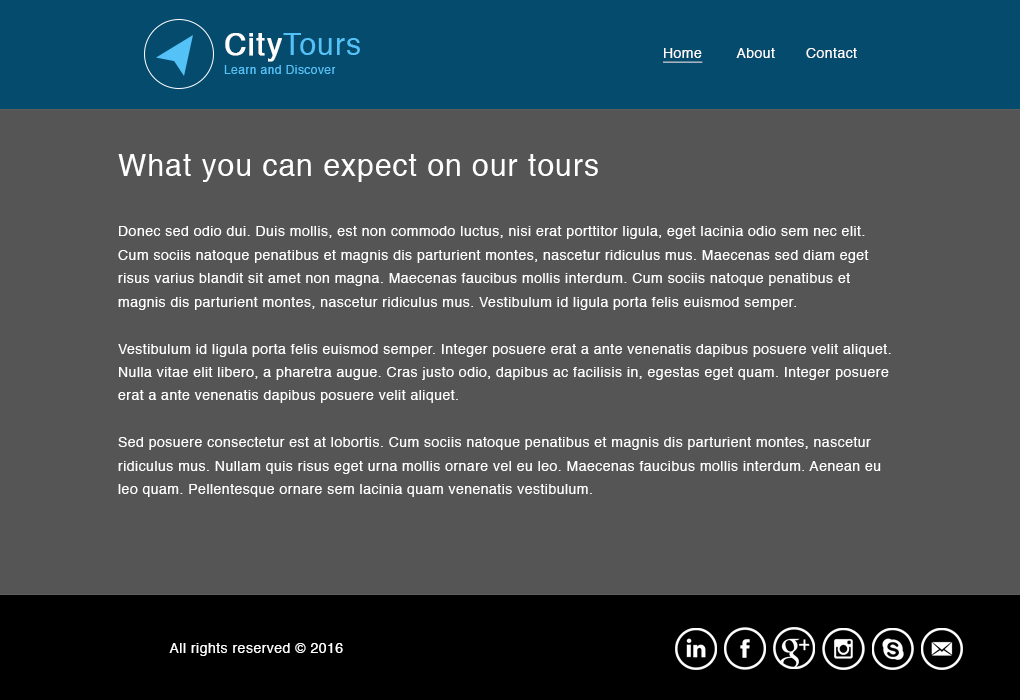
<style>
.page{position:relative;width:1020px;height:700px;background:#555555}
.page>*{position:absolute;margin:0}
.t1{font:11.9px/19.3px "Helvetica";letter-spacing:0.035em;color:#54c1f7}
.t2{font:29.8px/23.3px "Helvetica";letter-spacing:0.035em;color:#ffffff;font-weight:bold}
.t3{font:29.8px/23.3px "Helvetica";letter-spacing:0.035em;color:#54c1f7}
.t4{font:14.2px "Helvetica";letter-spacing:0.035em;color:#ffffff}
.t5{font:14.2px "Helvetica";letter-spacing:0.035em;color:#ffffff;text-decoration:underline}
.t6{font:29.9px "Helvetica";letter-spacing:0.035em;color:#ffffff}
.t7{font:14px/23.4px "Helvetica";letter-spacing:0.035em;color:#ffffff}
.t8{font:14px "Helvetica";letter-spacing:0.035em;color:#ffffff}
</style>
<div class="page">
<p class="t1" style="left:224px;top:33px;width:136px;height:41px"><span class="t2">City</span><span class="t3">Tours<br></span>Learn and Discover</p>
<p class="t4" style="left:663px;top:48px;width:194px;height:15px"><span class="t5">Home</span>        About       Contact</p>
<p class="t6" style="left:118px;top:154px;width:480px;height:28px">What you can expect on our tours</p>
<p class="t7" style="left:118px;top:226px;width:773px;height:271px">Donec sed odio dui. Duis mollis, est non commodo luctus, nisi erat porttitor ligula, eget lacinia odio sem nec elit. Cum sociis natoque penatibus et magnis dis parturient montes, nascetur ridiculus mus. Maecenas sed diam eget risus varius blandit sit amet non magna. Maecenas faucibus mollis interdum. Cum sociis natoque penatibus et magnis dis parturient montes, nascetur ridiculus mus. Vestibulum id ligula porta felis euismod semper.<br><br>Vestibulum id ligula porta felis euismod semper. Integer posuere erat a ante venenatis dapibus posuere velit aliquet. Nulla vitae elit libero, a pharetra augue. Cras justo odio, dapibus ac facilisis in, egestas eget quam. Integer posuere erat a ante venenatis dapibus posuere velit aliquet.<br><br>Sed posuere consectetur est at lobortis. Cum sociis natoque penatibus et magnis dis parturient montes, nascetur ridiculus mus. Nullam quis risus eget urna mollis ornare vel eu leo. Maecenas faucibus mollis interdum. Aenean eu leo quam. Pellentesque ornare sem lacinia quam venenatis vestibulum.</p>
<p class="t8" style="left:169px;top:643px;width:174px;height:13px">All rights reserved © 2016</p>
</div>
